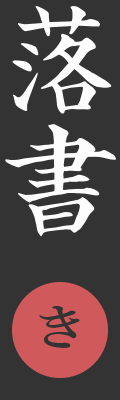
<style>
.page{position:relative;width:120px;height:400px;background:#333333}
.page>*{position:absolute;margin:0}
.t1{font:120px "SeiKaiCB1Std-Regular";color:#fdfdfd}
.t2{font:48px "YuMin-Demibold";color:#333333;scale:1.3 1}
</style>
<div class="page">
<p class="t1" style="left:5px;top:6px;width:111px;height:231px">落書</p>
<p class="t2" style="left:39px;top:306px;width:41px;height:42px">き</p>
</div>
